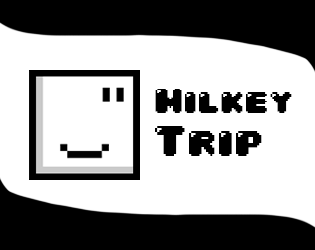
<style>
.page{position:relative;width:315px;height:250px;background:#ffffff}
.page>*{position:absolute;margin:0}
.t1{font:29.6px "04b30";color:#000000}
.t2{font:36px "04b30";color:#000000}
</style>
<div class="page">
<p class="t1" style="left:155px;top:89px;width:137px;height:24px">Milkey</p>
<p class="t2" style="left:155px;top:126px;width:107px;height:30px">Trip</p>
</div>
